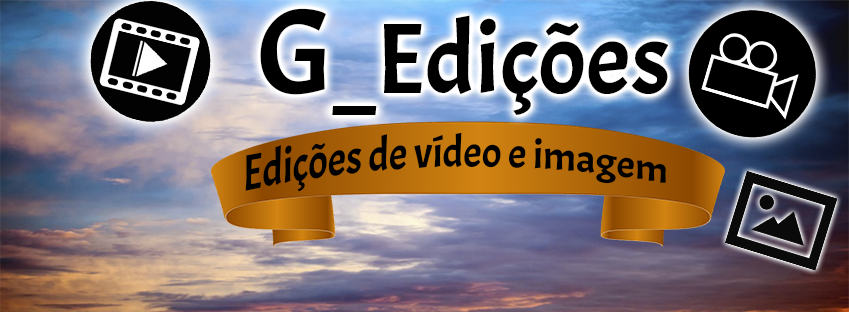
<style>
.page{position:relative;width:849px;height:312px}
.page>*{position:absolute;margin:0}
.t1{font:100px "Acme-Regular";color:#000000}
.t2{font:120px "Acme-Regular";color:#000000}
.t3{font:39.7px "Acme-Regular";color:#000000;scale:1.03 1}
</style>
<div class="page">
<p class="t1" style="left:260px;top:8px;width:409px;height:107px"><span class="t2">G</span>_Edições</p>
<p class="t3" style="left:245px;top:132px;width:421px;height:60px;rotate:1deg">Edições de vídeo e imagem</p>
</div>
